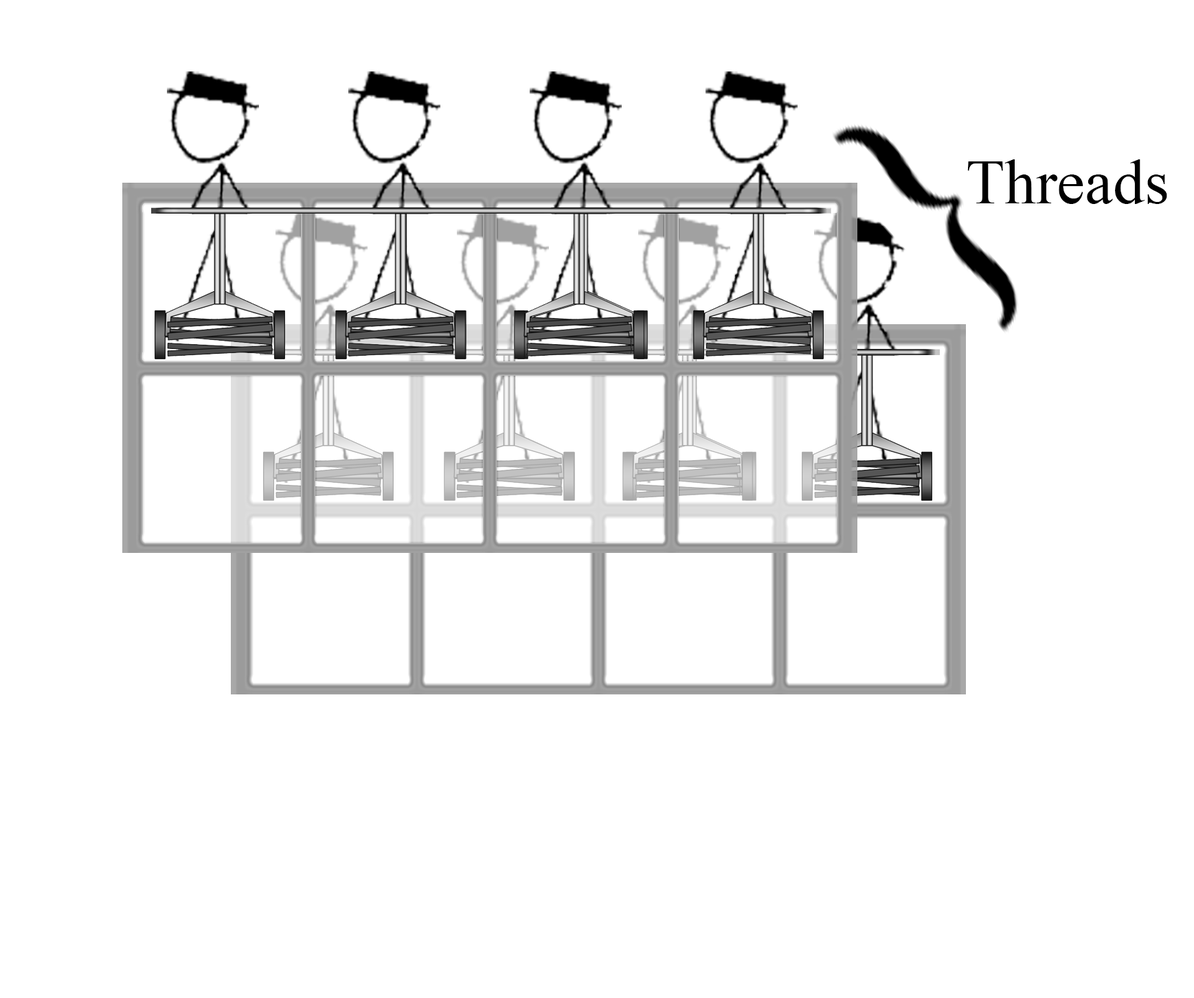
<style>
.page{position:relative;width:1194px;height:998px;background:#ffffff}
.page>*{position:absolute;margin:0}
.t1{font:63px "TimesNewRomanPSMT";color:#000000}
</style>
<div class="page">
<p class="t1" style="left:968px;top:159px;width:199px;height:45px">Threads</p>
</div>
